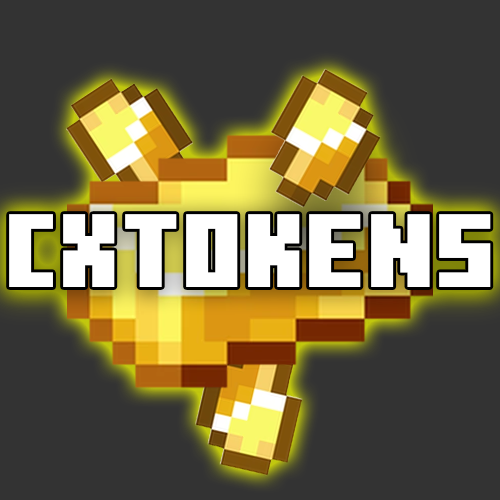
<style>
.page{position:relative;width:500px;height:500px;background:#333333}
.page>*{position:absolute;margin:0}
.t1{font:104.2px "MinecraftTen";color:#ffffff}
</style>
<div class="page">
<p class="t1" style="left:9px;top:214px;width:482px;height:73px">CxTokens</p>
</div>
